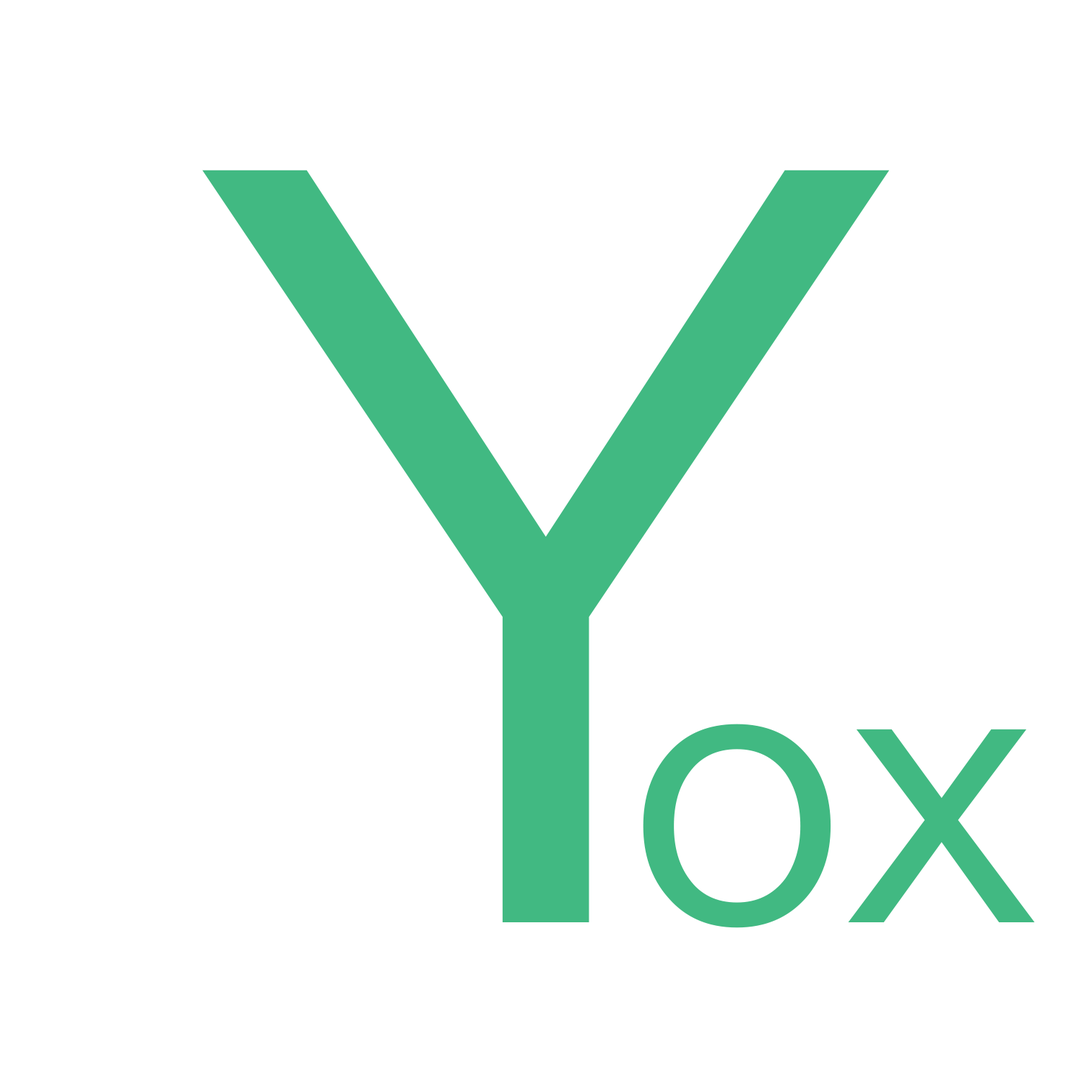
<style>
.page{position:relative;width:1092px;height:1092px;background:#ffffff}
.page>*{position:absolute;margin:0}
.t1{font:1053.2px "PingFangSC-Regular";color:#41b982}
.t2{font:373.1px "PingFangSC-Regular";color:#41b982}
</style>
<div class="page">
<p class="t1" style="left:202px;top:170px;width:688px;height:752px">Y</p>
<p class="t2" style="left:643px;top:724px;width:392px;height:204px">ox</p>
</div>
